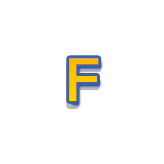
<style>
.page{position:relative;width:164px;height:164px;background:#ffffff}
.page>*{position:absolute;margin:0}
.t1{font:59.8px "PingFangHK-Semibold";color:#ffc400;text-transform:uppercase}
</style>
<div class="page">
<p class="t1" style="left:69px;top:58px;width:30px;height:43px">f</p>
</div>
